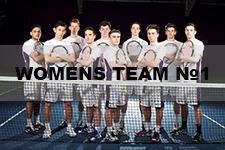
<style>
.page{position:relative;width:225px;height:150px}
.page>*{position:absolute;margin:0}
.t1{font:18px "Arial-Black";color:#050505}
</style>
<div class="page">
<p class="t1" style="left:15px;top:67px;width:194px;height:13px">WOMENS TEAM №1</p>
</div>
